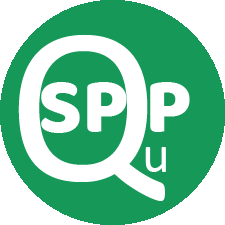
<style>
.page{position:relative;width:225px;height:225px;background:#169859}
.page>*{position:absolute;margin:0}
.t1{font:226.7px "Calibri";color:#ffffff}
.t2{font:80px "BalooBhai-Regular";color:#ffffff}
.t3{font:53.3px "Calibri";color:#ffffff}
</style>
<div class="page">
<p class="t1" style="left:18px;top:34px;width:147px;height:167px">Q</p>
<p class="t2" style="left:41px;top:82px;width:149px;height:51px">SP P</p>
<p class="t3" style="left:145px;top:147px;width:21px;height:25px">u</p>
</div>
